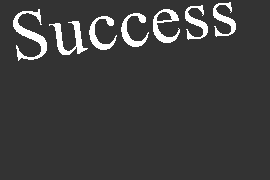
<style>
.page{position:relative;width:270px;height:180px;background:#333333}
.page>*{position:absolute;margin:0}
.t1{font:72px "TimesNewRomanPSMT";color:#ffffff}
</style>
<div class="page">
<p class="t1" style="left:13px;top:2px;width:223px;height:59px;rotate:-7deg">Success</p>
</div>
